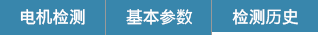
<style>
.page{position:relative;width:318px;height:35px;background:#3886ac}
.page>*{position:absolute;margin:0}
.t1{font:16.7px "LiHeiPro";color:#ffffff}
</style>
<div class="page">
<p class="t1" style="left:20px;top:9px;width:65px;height:16px">电机检测</p>
<p class="t1" style="left:126px;top:9px;width:67px;height:16px">基本参数</p>
<p class="t1" style="left:232px;top:8px;width:66px;height:17px">检测历史</p>
</div>
